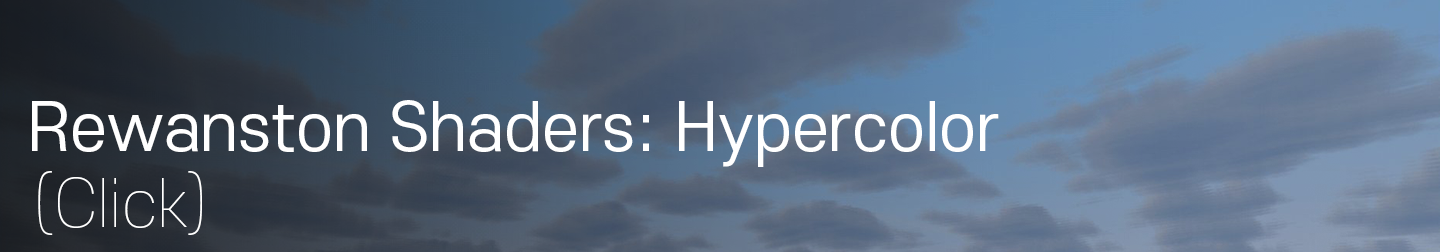
<style>
.page{position:relative;width:1440px;height:252px}
.page>*{position:absolute;margin:0}
.t1{font:64px "S-CoreDream-4Regular";color:#ffffff}
.t2{font:64px "S-CoreDream-1Thin";color:#ffffff}
</style>
<div class="page">
<p class="t1" style="left:32px;top:100px;width:967px;height:67px">Rewanston Shaders: Hypercolor</p>
<p class="t2" style="left:38px;top:171px;width:164px;height:64px">(Click)</p>
</div>
